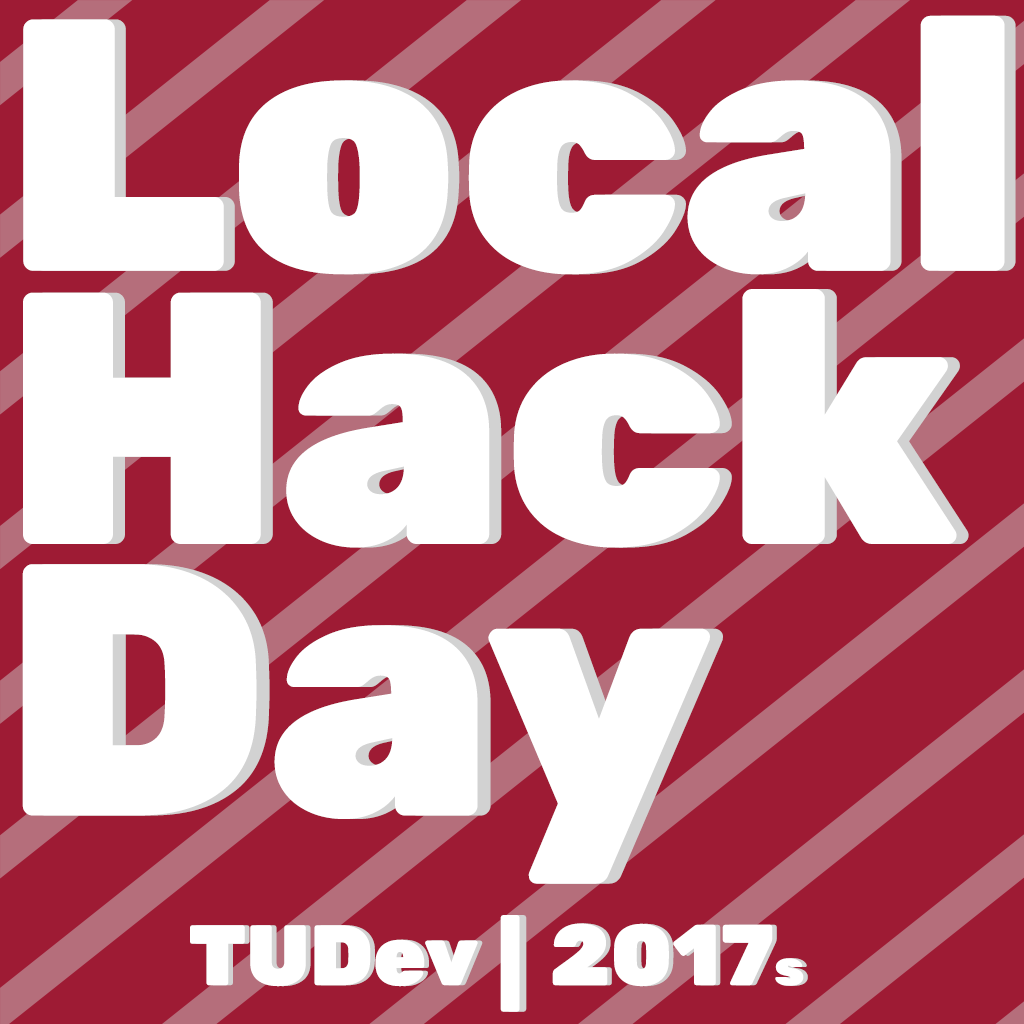
<style>
.page{position:relative;width:1024px;height:1024px;background:#ffffff}
.page>*{position:absolute;margin:0}
.t1{font:358.7px "Rubik-Black";color:#ffffff}
.t2{font:87.5px "Rubik-Black";color:#ffffff;scale:1.13 1}
.t3{font:87.5px "Rubik-Black";scale:1.13 1}
.t4{font:85.4px "Rubik-Black";color:#ffffff}
.t5{font:86.2px "Rubik-Black";color:#ffffff}
.t6{font:50.6px "Rubik-Black";color:#ffffff}
</style>
<div class="page">
<p class="t1" style="left:23px;top:15px;width:982px;height:260px">Local</p>
<p class="t1" style="left:34px;top:15px;width:982px;height:260px">Local</p>
<p class="t1" style="left:23px;top:289px;width:934px;height:259px">Hack</p>
<p class="t1" style="left:35px;top:289px;width:934px;height:259px">Hack</p>
<p class="t1" style="left:22px;top:564px;width:688px;height:320px">Day</p>
<p class="t1" style="left:35px;top:564px;width:688px;height:320px">Day</p>
<p class="t2" style="left:500px;top:915px;width:20px;height:97px">|</p>
<p class="t3" style="left:507px;top:915px;width:20px;height:97px">|</p>
<p class="t4" style="left:190px;top:925px;width:288px;height:62px">TUDev</p>
<p class="t4" style="left:194px;top:925px;width:289px;height:62px">TUDev</p>
<p class="t5" style="left:552px;top:923px;width:252px;height:64px">2017<span class="t6">s</span></p>
<p class="t5" style="left:557px;top:923px;width:251px;height:64px">2017<span class="t6">s</span></p>
</div>
